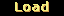
<style>
.page{position:relative;width:64px;height:16px;background:#000000}
.page>*{position:absolute;margin:0}
.t1{font:13px "Meiryo";color:#f0f080;font-weight:bold}
</style>
<div class="page">
<p class="t1" style="left:15px;top:1px;width:33px;height:10px">Load</p>
</div>
